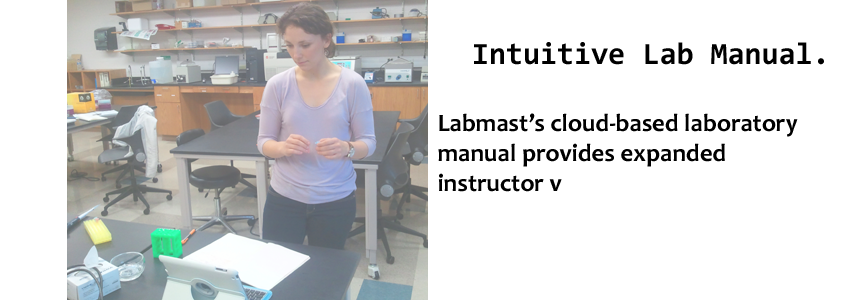
<style>
.page{position:relative;width:850px;height:300px;background:#ffffff}
.page>*{position:absolute;margin:0}
.t1{font:31px "Consolas-Bold";color:#000000}
.t2{font:25px "Candara-Bold";color:#000000}
</style>
<div class="page">
<p class="t1" style="left:474px;top:42px;width:350px;height:23px">Intuitive Lab Manual.</p>
<p class="t2" style="left:438px;top:113px;width:360px;height:79px">Labmast’s cloud-based laboratory<br>manual provides expanded <br>instructor v</p>
</div>
